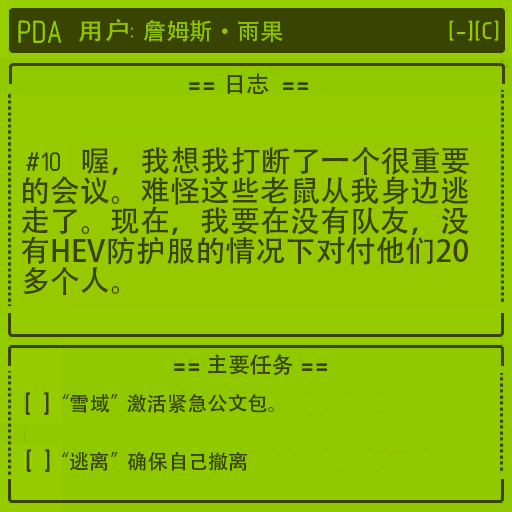
<style>
.page{position:relative;width:512px;height:512px;background:#90c900}
.page>*{position:absolute;margin:0}
.t1{font:30px/30px "AdobeHeitiStd-Regular";color:#384400}
</style>
<div class="page">
<p class="t1" style="left:21px;top:146px;width:448px;height:149px">喔，我想我打断了一个很重要<br>的会议。难怪这些老鼠从我身边逃<br>走了。现在，我要在没有队友，没<br>有HEV防护服的情况下对付他们20<br>多个人。</p>
</div>
